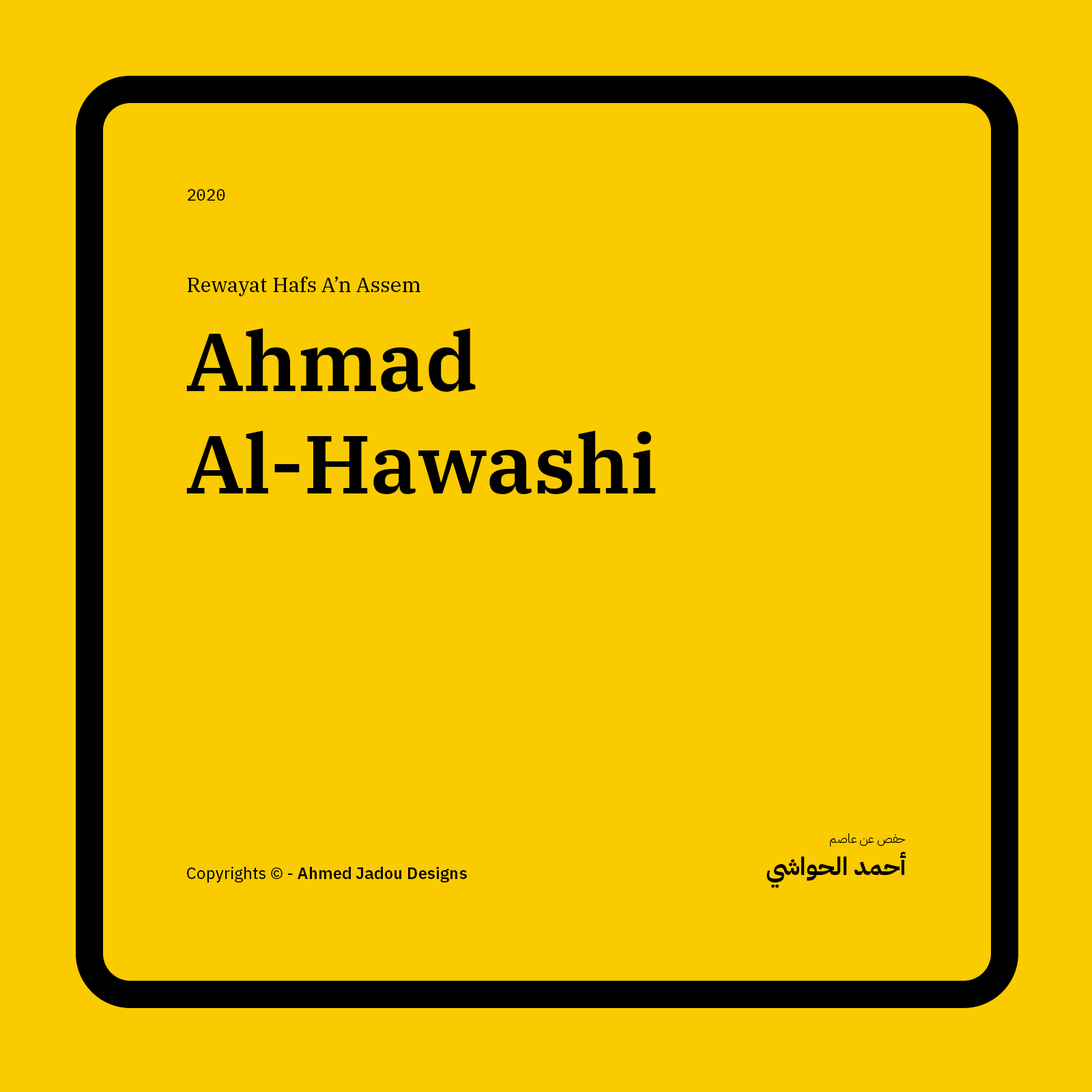
<style>
.page{position:relative;width:1092px;height:1092px;background:#facb00}
.page>*{position:absolute;margin:0}
.t1{font:16.4px "IBMPlexMono-Text";color:#000000}
.t2{font:20.5px "IBMPlexSerif-Text";color:#000000}
.t3{font:81.9px/102.7px "IBMPlexSerif-SemiBold";color:#000000}
.t4{font:12.3px "IBMPlexArabic-Light";color:#000000}
.t5{font:24.6px "IBMPlexArabic-Bold";color:#000000}
.t6{font:16.4px "IBMPlexSans-SemiBold";color:#000000}
.t7{font:16.4px "IBMPlexSans-Text";color:#000000}
</style>
<div class="page">
<p class="t1" style="left:188px;top:189px;width:37px;height:12px">2020</p>
<p class="t2" style="left:187px;top:276px;width:233px;height:20px">Rewayat Hafs A’n Assem</p>
<p class="t3" style="left:186px;top:328px;width:470px;height:166px">Ahmad Al-Hawashi</p>
<p class="t4" style="left:830px;top:833px;width:76px;height:14px">حفص عن عاصم</p>
<p class="t5" style="left:766px;top:852px;width:140px;height:36px">أحمد الحواشي</p>
<p class="t6" style="left:187px;top:867px;width:280px;height:15px"><span class="t7">Copyrights © - </span>Ahmed Jadou Designs</p>
</div>
